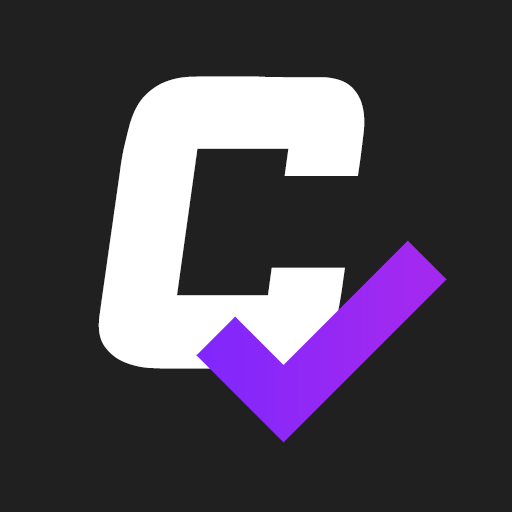
<style>
.page{position:relative;width:512px;height:512px;background:#202020}
.page>*{position:absolute;margin:0}
.t1{font:416.7px "Closeness-BoldItalic";letter-spacing:0.01em;color:#ffffff}
</style>
<div class="page">
<p class="t1" style="left:98px;top:76px;width:267px;height:293px">C</p>
</div>
